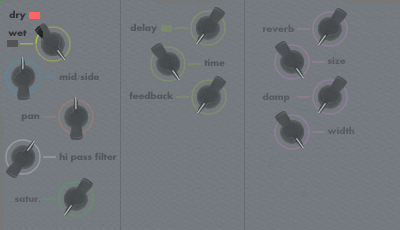
<style>
.page{position:relative;width:400px;height:230px}
.page>*{position:absolute;margin:0}
.t1{font:10px "Aharoni-Bold";color:#323232}
.t2{font:10px "Aharoni-Bold";color:#535658}
.t3{font:10px "Aharoni-Bold";color:#585b5e}
.t4{font:10px "Aharoni-Bold";color:#545659}
.t5{font:10px "Aharoni-Bold";color:#585a5d}
.t6{font:10px "Aharoni-Bold";color:#535659}
.t7{font:10px "Aharoni-Bold";color:#585b5d}
</style>
<div class="page">
<p class="t1" style="left:9px;top:10px;width:17px;height:11px">dry</p>
<p class="t1" style="left:8px;top:30px;width:19px;height:6px">wet</p>
<p class="t2" style="left:130px;top:23px;width:28px;height:11px">delay</p>
<p class="t3" style="left:263px;top:24px;width:31px;height:8px">reverb</p>
<p class="t4" style="left:204px;top:59px;width:21px;height:7px">time</p>
<p class="t5" style="left:327px;top:57px;width:19px;height:7px">size</p>
<p class="t4" style="left:59px;top:72px;width:40px;height:8px">mid/side</p>
<p class="t6" style="left:129px;top:91px;width:45px;height:8px">feedback</p>
<p class="t5" style="left:262px;top:92px;width:28px;height:11px">damp</p>
<p class="t6" style="left:21px;top:114px;width:19px;height:8px">pan</p>
<p class="t7" style="left:327px;top:126px;width:28px;height:8px">width</p>
<p class="t4" style="left:59px;top:152px;width:58px;height:11px">hi pass filter</p>
<p class="t7" style="left:14px;top:196px;width:27px;height:6px">satur.</p>
</div>
